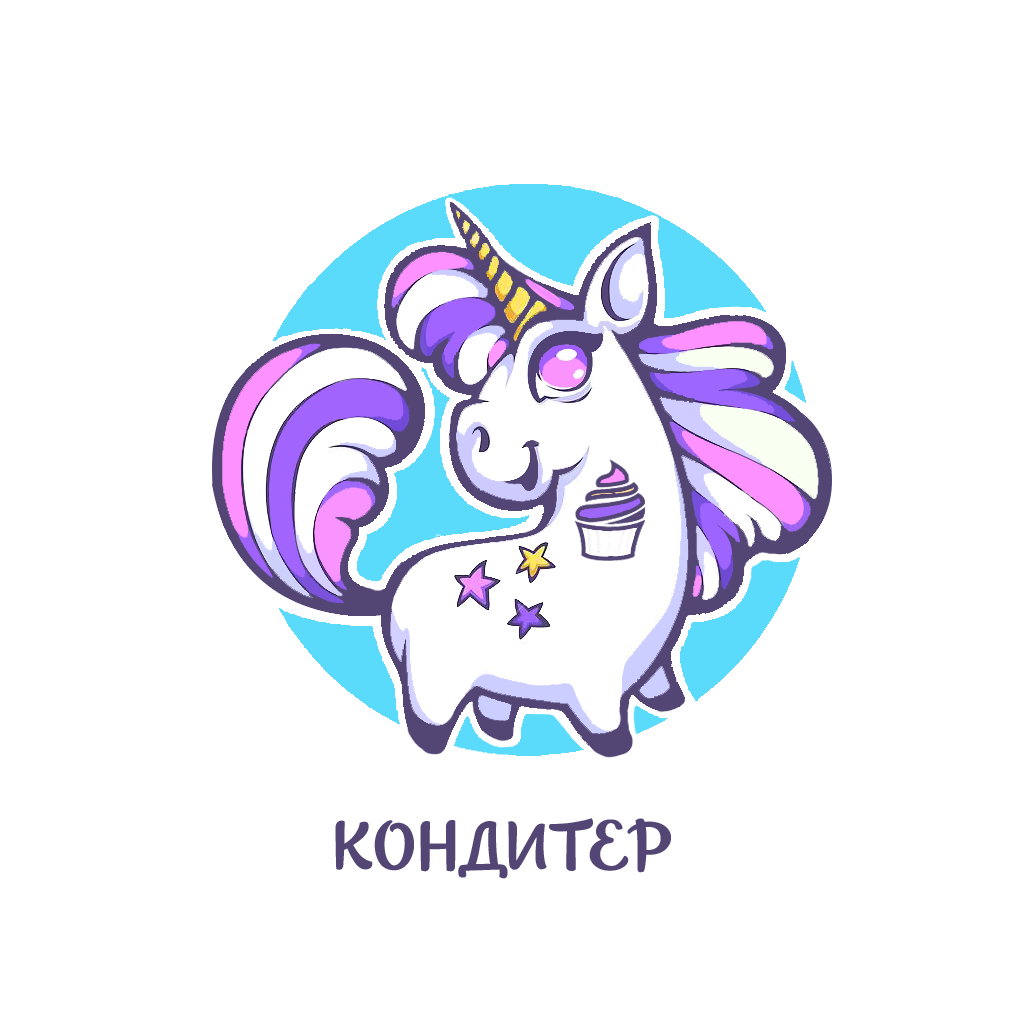
<style>
.page{position:relative;width:1026px;height:1026px;background:#ffffff}
.page>*{position:absolute;margin:0}
.t1{font:66.7px "LifehackBasic-Regular";color:#534674}
</style>
<div class="page">
<p class="t1" style="left:335px;top:818px;width:336px;height:61px">КОНДИТЕР</p>
</div>
